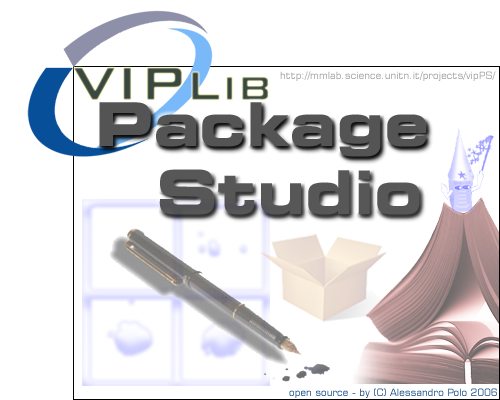
<style>
.page{position:relative;width:500px;height:400px;background:#ffffff}
.page>*{position:absolute;margin:0}
.t1{font:10px "Square721BT-Roman";color:#9f9f9f}
.t2{font:60px "Square721BT-BoldExtended";color:#545454}
.t3{font:60px "Square721BT-BoldExtended";color:#575757}
.t4{font:10px "Square721BT-Roman";color:#184e86}
</style>
<div class="page">
<p class="t1" style="left:280px;top:71px;width:216px;height:10px">http://mmlab.science.unitn.it/projects/vipPS/</p>
<p class="t2" style="left:99px;top:102px;width:328px;height:55px">Package</p>
<p class="t3" style="left:159px;top:169px;width:261px;height:46px">Studio</p>
<p class="t4" style="left:289px;top:388px;width:208px;height:10px">open source - by (C) Alessandro Polo 2006</p>
</div>
